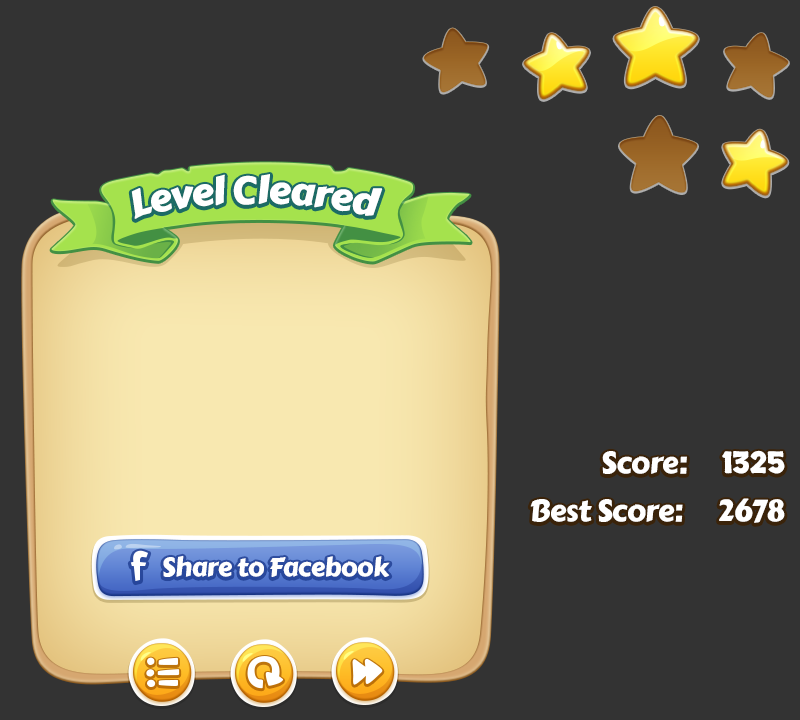
<style>
.page{position:relative;width:800px;height:720px;background:#333333}
.page>*{position:absolute;margin:0}
.t1{font:38px "CarterOne";letter-spacing:-0.02em;color:#ffffff}
.t2{font:30px/48px "CarterOne";letter-spacing:-0.02em;color:#ffffff}
.t3{font:30px/48px "Skranji-Bold";letter-spacing:-0.02em;color:#ffffff}
.t4{font:26px "CarterOne";letter-spacing:-0.02em;color:#ffffff}
</style>
<div class="page">
<p class="t1" style="left:131px;top:174px;width:252px;height:45px">Level Cleared</p>
<p class="t2" style="left:530px;top:450px;width:255px;height:73px;text-align:right">Score:      <span class="t3">1325<br></span>Best Score:      2678</p>
<p class="t4" style="left:163px;top:555px;width:227px;height:22px">Share to Facebook</p>
</div>
